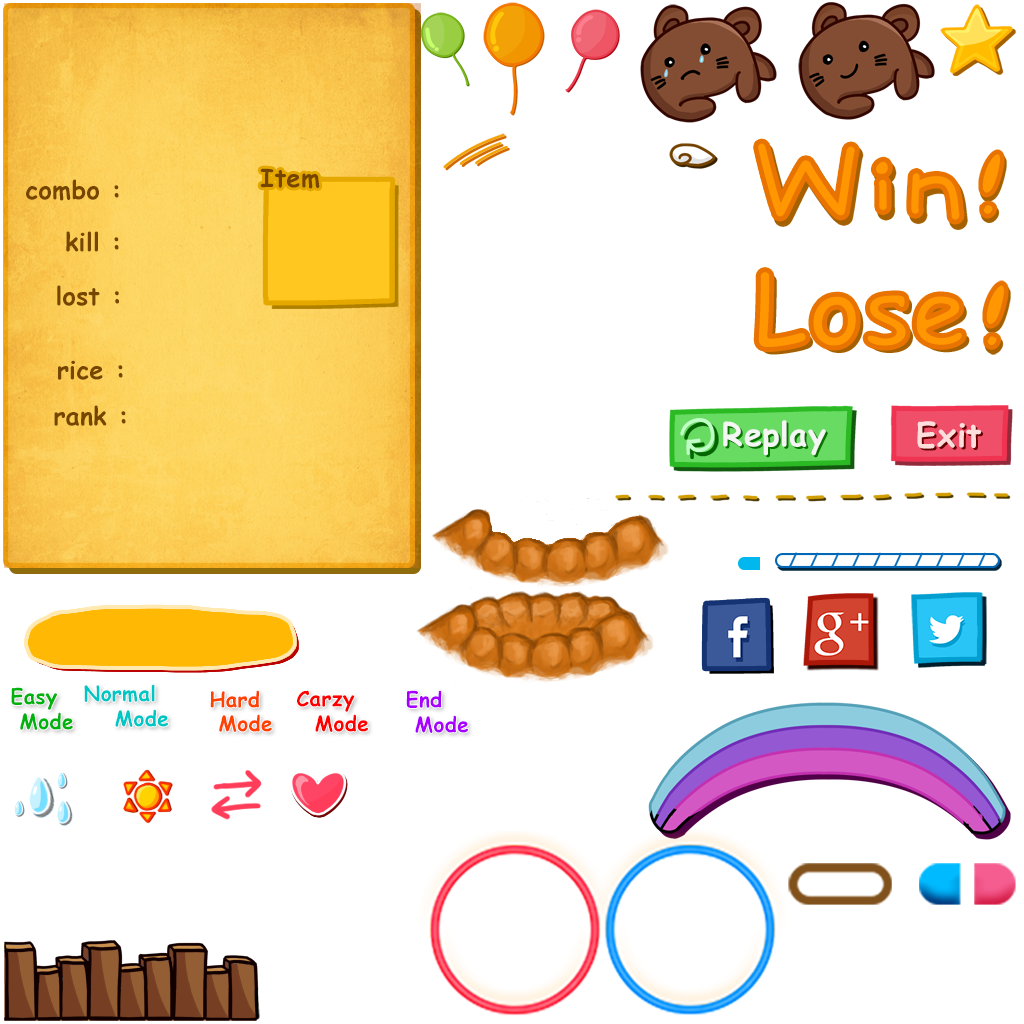
<style>
.page{position:relative;width:1024px;height:1024px;background:#ffffff}
.page>*{position:absolute;margin:0}
.t1{font:25px "ComicSansMS-Bold";letter-spacing:0.01em;color:#764500}
.t2{font:100px "ComicSansMS-Bold";letter-spacing:0.01em;color:#ff9602}
.t3{font:32.7px "ComicSansMS-Bold";letter-spacing:0.01em;color:#f3f6f2}
.t4{font:32.7px "ComicSansMS-Bold";letter-spacing:0.01em;color:#fedddd}
.t5{font:20.8px "ComicSansMS-Bold";letter-spacing:0.01em;color:#00b10c}
.t6{font:20.8px "ComicSansMS-Bold";letter-spacing:0.01em;color:#00c6c4}
.t7{font:20.8px "ComicSansMS-Bold";letter-spacing:0.01em;color:#ff4200}
.t8{font:20.8px "ComicSansMS-Bold";letter-spacing:0.01em;color:#ff0000}
.t9{font:20.8px "ComicSansMS-Bold";letter-spacing:0.01em;color:#a800ff}
</style>
<div class="page">
<p class="t1" style="left:260px;top:168px;width:60px;height:21px">Item</p>
<p class="t1" style="left:26px;top:179px;width:93px;height:22px">combo :</p>
<p class="t1" style="left:66px;top:231px;width:53px;height:21px">kill :</p>
<p class="t2" style="left:756px;top:269px;width:209px;height:81px">Lose</p>
<p class="t1" style="left:57px;top:285px;width:62px;height:21px">lost :</p>
<p class="t1" style="left:58px;top:360px;width:65px;height:20px">rice :</p>
<p class="t1" style="left:54px;top:405px;width:72px;height:21px">rank :</p>
<p class="t3" style="left:723px;top:420px;width:103px;height:36px">Replay</p>
<p class="t4" style="left:917px;top:421px;width:64px;height:28px">Exit</p>
<p class="t5" style="left:11px;top:687px;width:62px;height:43px">Easy<br> Mode</p>
<p class="t6" style="left:84px;top:684px;width:84px;height:43px">Normal<br>    Mode</p>
<p class="t7" style="left:210px;top:690px;width:62px;height:42px">Hard<br> Mode</p>
<p class="t8" style="left:297px;top:690px;width:71px;height:42px">Carzy<br>  Mode</p>
<p class="t9" style="left:406px;top:690px;width:62px;height:43px">End<br>  Mode</p>
</div>
